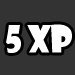
<style>
.page{position:relative;width:75px;height:75px;background:#333333}
.page>*{position:absolute;margin:0}
.t1{font:36.7px "ShowcardGothic-Reg";letter-spacing:-0.025em;color:#ffffff;scale:0.91 1}
</style>
<div class="page">
<p class="t1" style="left:6px;top:24px;width:66px;height:29px">5 XP</p>
</div>
